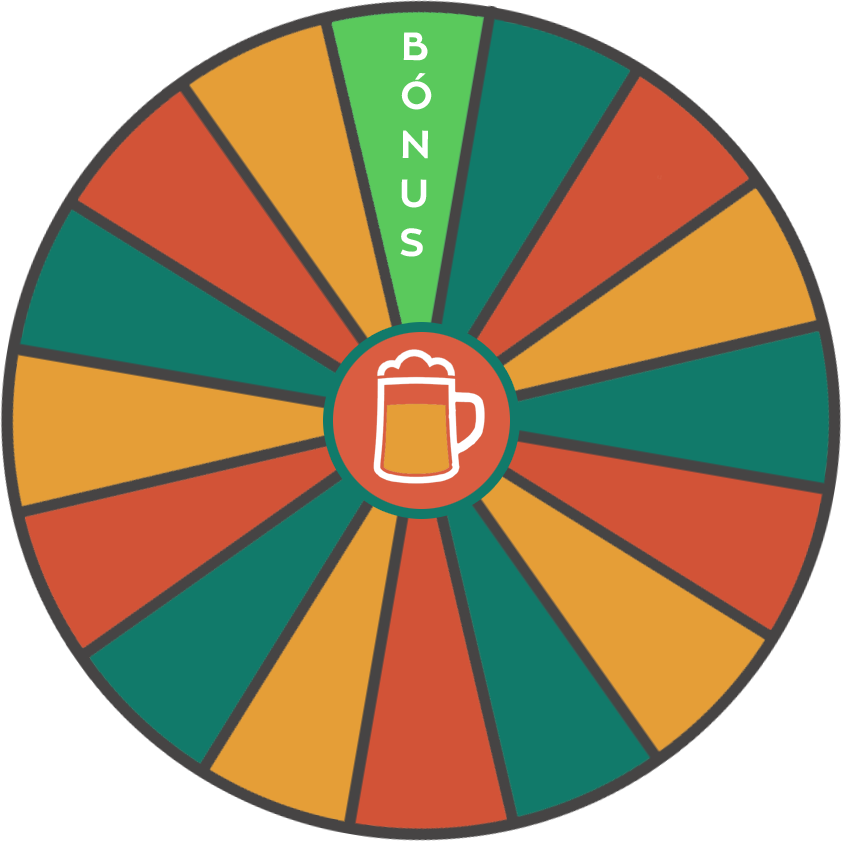
<style>
.page{position:relative;width:842px;height:841px;background:#ffffff}
.page>*{position:absolute;margin:0}
.t1{font:39.2px/49px "ZonaPro-Bold";letter-spacing:0.025em;color:#ffffff}
</style>
<div class="page">
<p class="t1" style="left:400px;top:32px;width:32px;height:225px;rotate:1deg">B<br>Ó<br>N<br>U<br>S</p>
</div>
